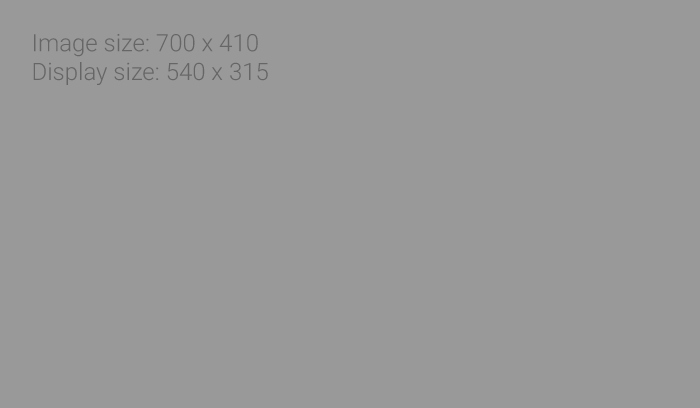
<style>
.page{position:relative;width:700px;height:408px;background:#999999}
.page>*{position:absolute;margin:0}
.t1{font:24px "Roboto-Light";color:#666666}
</style>
<div class="page">
<p class="t1" style="left:33px;top:34px;width:235px;height:51px">Image size: 700 x 410<br>Display size: 540 x 315</p>
</div>
